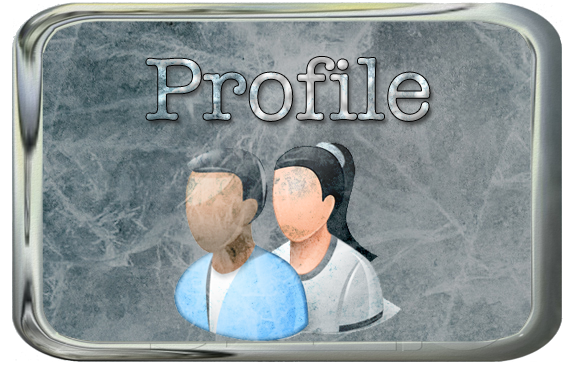
<style>
.page{position:relative;width:575px;height:365px}
.page>*{position:absolute;margin:0}
.t1{font:90px "AmericanTypewriter"}
</style>
<div class="page">
<p class="t1" style="left:146px;top:57px;width:284px;height:64px">Profile</p>
</div>
